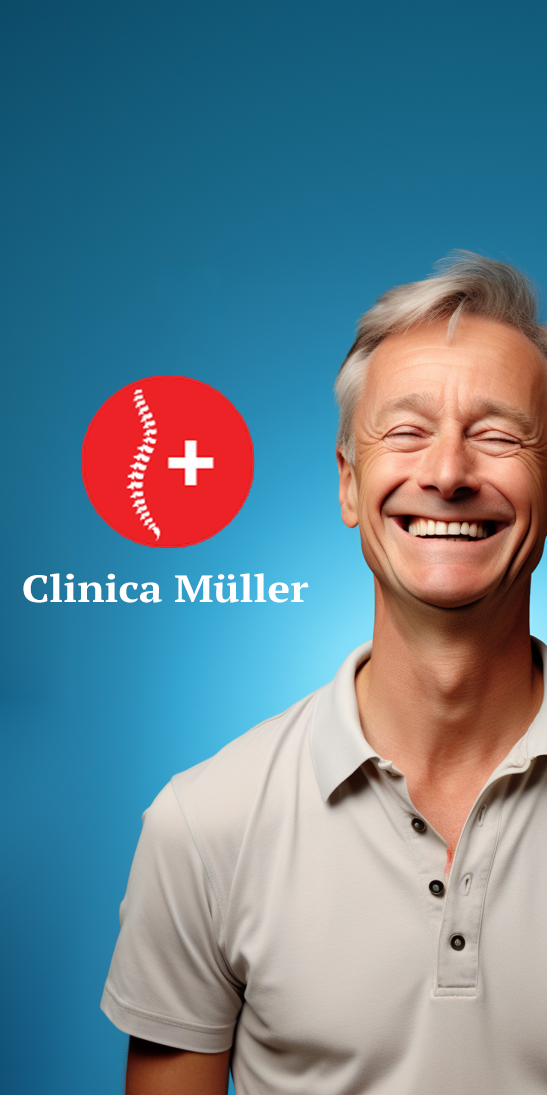
<style>
.page{position:relative;width:547px;height:1095px}
.page>*{position:absolute;margin:0}
.t1{font:38px "PTSerif-Bold";color:#ffffff;scale:1.11 1}
</style>
<div class="page">
<p class="t1" style="left:23px;top:573px;width:286px;height:30px">Clinica Müller</p>
</div>
